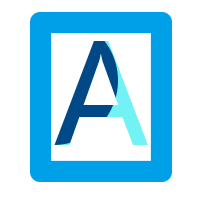
<style>
.page{position:relative;width:200px;height:200px;background:#ffffff}
.page>*{position:absolute;margin:0}
.t1{font:137px "MicrosoftYaHei"}
</style>
<div class="page">
<p class="t1" style="left:54px;top:41px;width:94px;height:104px">A</p>
</div>
